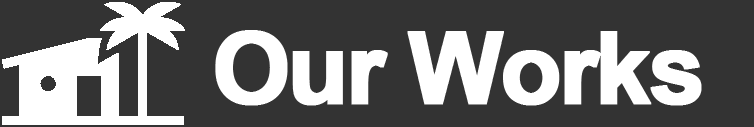
<style>
.page{position:relative;width:754px;height:127px;background:#333333}
.page>*{position:absolute;margin:0}
.t1{font:100px "Arial-BoldMT";letter-spacing:-0.05em;color:#ffffff;font-weight:bold}
</style>
<div class="page">
<p class="t1" style="left:215px;top:30px;width:487px;height:76px">Our Works</p>
</div>
